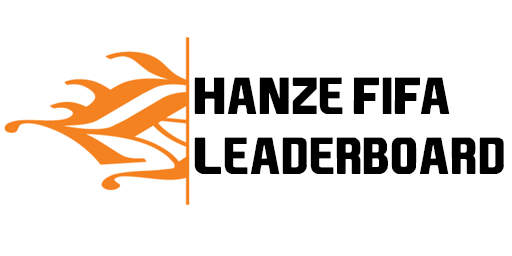
<style>
.page{position:relative;width:512px;height:256px;background:#ffffff}
.page>*{position:absolute;margin:0}
.t1{font:50px "EASPORTS";color:#000000}
</style>
<div class="page">
<p class="t1" style="left:194px;top:77px;width:310px;height:97px">Hanze fifa <br>leaderboard</p>
</div>
